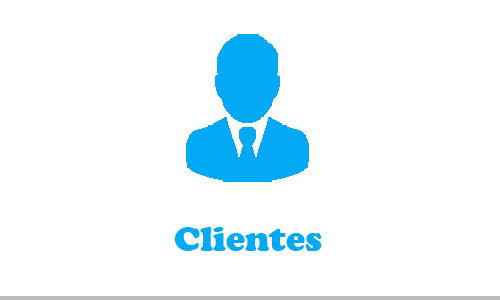
<style>
.page{position:relative;width:500px;height:300px;background:#ffffff}
.page>*{position:absolute;margin:0}
.t1{font:36px "CooperBlack";color:#03a9f4}
</style>
<div class="page">
<p class="t1" style="left:174px;top:227px;width:148px;height:24px">Clientes</p>
</div>
